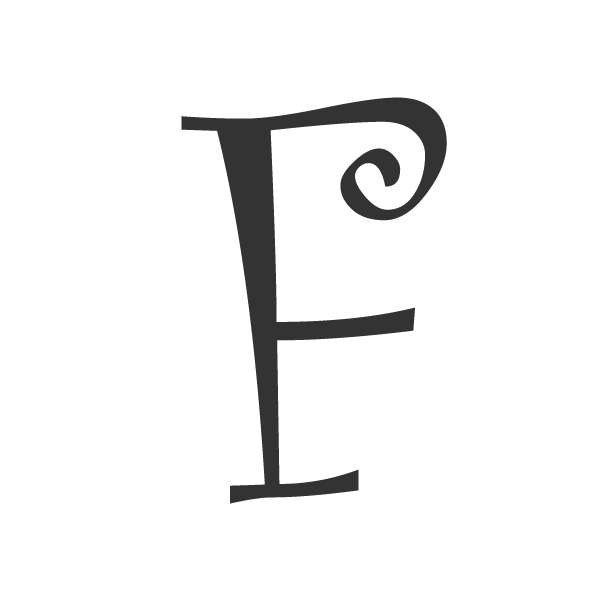
<style>
.page{position:relative;width:600px;height:600px;background:#ffffff}
.page>*{position:absolute;margin:0}
.t1{font:600px "CurlzMT";letter-spacing:0.575em;color:#333333}
</style>
<div class="page">
<p class="t1" style="left:181px;top:97px;width:266px;height:407px">F</p>
</div>
